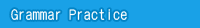
<style>
.page{position:relative;width:200px;height:28px;background:#19a1e7}
.page>*{position:absolute;margin:0}
.t1{font:14px "DFYuan-Md-HK-BF";letter-spacing:0.02em;color:#ffffff}
</style>
<div class="page">
<p class="t1" style="left:11px;top:9px;width:116px;height:11px">Grammar Practice</p>
</div>
